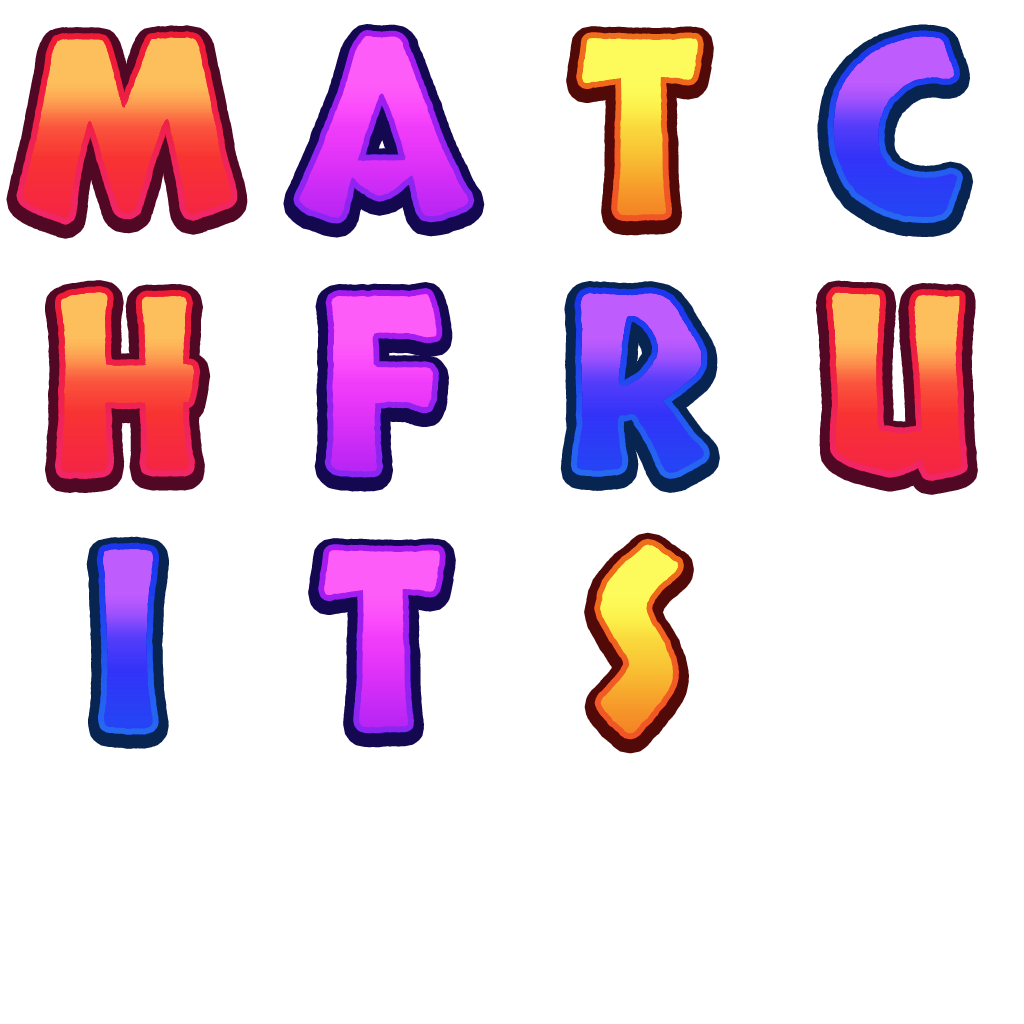
<style>
.page{position:relative;width:1024px;height:1024px;background:#ffffff}
.page>*{position:absolute;margin:0}
.t1{font:240px "Skranji";letter-spacing:0.05em;text-transform:uppercase}
</style>
<div class="page">
<p class="t1" style="left:22px;top:37px;width:210px;height:182px">M</p>
<p class="t1" style="left:299px;top:36px;width:170px;height:182px">A</p>
<p class="t1" style="left:582px;top:38px;width:116px;height:178px">T</p>
<p class="t1" style="left:833px;top:36px;width:125px;height:181px">C</p>
<p class="t1" style="left:61px;top:292px;width:134px;height:181px">H</p>
<p class="t1" style="left:330px;top:294px;width:107px;height:178px">F</p>
<p class="t1" style="left:576px;top:293px;width:128px;height:180px">R</p>
<p class="t1" style="left:831px;top:292px;width:131px;height:183px">U</p>
<p class="t1" style="left:600px;top:544px;width:78px;height:190px">S</p>
<p class="t1" style="left:102px;top:548px;width:51px;height:181px">I</p>
<p class="t1" style="left:324px;top:550px;width:116px;height:178px">T</p>
</div>
